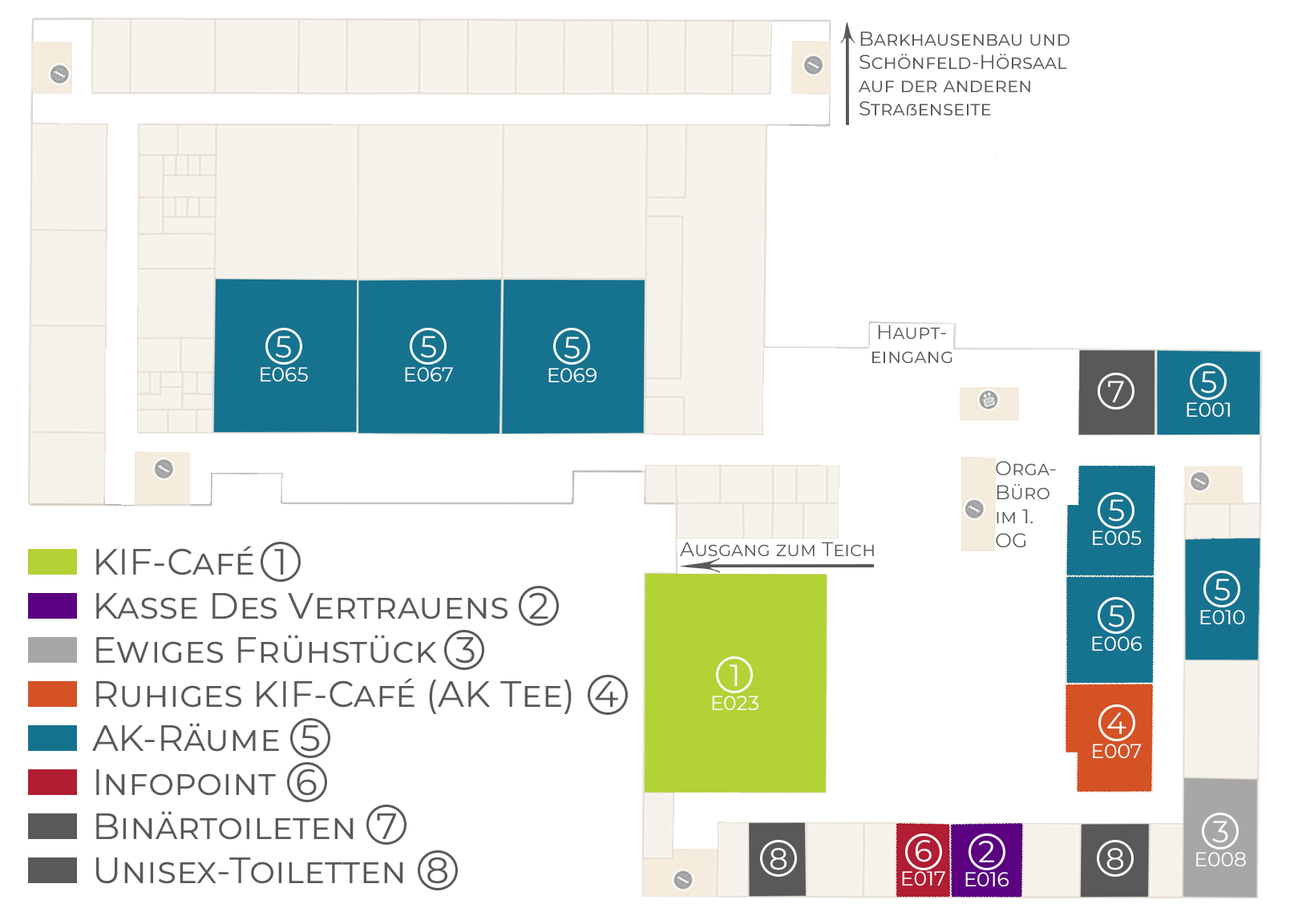
<style>
.page{position:relative;width:1290px;height:924px;background:#ffffff}
.page>*{position:absolute;margin:0}
.t1{font:20px/23.4px "Montserrat-Regular";color:#595959;font-variant:small-caps}
.t2{font:20px "Montserrat-Regular";color:#595959;font-variant:small-caps}
.t3{font:20px "Montserrat-Regular";color:#ffffff;font-variant:small-caps}
.t4{font:30.1px "Montserrat-Regular";color:#ffffff;font-variant:small-caps}
.t5{font:36.7px "Montserrat-Regular";color:#595959;font-variant:small-caps}
.t6{font:40.1px "Montserrat-Regular";color:#595959;font-variant:small-caps}
.t7{font:30.1px "Montserrat-Regular";color:#ffffff}
</style>
<div class="page">
<p class="t1" style="left:859px;top:31px;width:210px;height:85px">Barkhausenbau und <br>Schönfeld-Hörsaal auf der anderen Straßenseite</p>
<p class="t2" style="left:872px;top:325px;width:80px;height:39px;text-align:center">Haupt-<br>eingang</p>
<p class="t3" style="left:261px;top:336px;width:47px;height:46px;text-align:center"><span class="t4">5<br></span>E065</p>
<p class="t3" style="left:405px;top:336px;width:48px;height:46px;text-align:center"><span class="t4">5<br></span>E067</p>
<p class="t3" style="left:548px;top:337px;width:48px;height:46px;text-align:center"><span class="t4">5<br></span>E069</p>
<p class="t3" style="left:1187px;top:371px;width:43px;height:47px;text-align:center"><span class="t4">5<br></span>E001</p>
<p class="t4" style="left:1108px;top:381px;width:16px;height:21px">7</p>
<p class="t2" style="left:996px;top:461px;width:60px;height:87px">Orga-Büro im 1. OG</p>
<p class="t3" style="left:1093px;top:499px;width:49px;height:47px;text-align:center"><span class="t4">5<br></span>E005</p>
<p class="t5" style="left:92px;top:546px;width:526px;height:338px"><span class="t6">  </span>KIF-Café  1<br>  Kasse Des Vertrauens  2<br>  Ewiges Frühstück  3<br>  Ruhiges KIF-Café (AK Tee)  4<br>  AK-Räume  5<br>  Infopoint  6<br>  Binärtoileten  7<br>  Unisex-Toiletten  8</p>
<p class="t2" style="left:680px;top:542px;width:194px;height:15px">Ausgang zum Teich</p>
<p class="t3" style="left:1200px;top:579px;width:45px;height:46px;text-align:center"><span class="t4">5<br></span>E010</p>
<p class="t3" style="left:1092px;top:605px;width:50px;height:47px;text-align:center"><span class="t4">5<br></span>E006</p>
<p class="t3" style="left:712px;top:665px;width:46px;height:46px;text-align:center"><span class="t4">1<br></span>E023</p>
<p class="t3" style="left:1093px;top:713px;width:49px;height:46px;text-align:center"><span class="t4">4<br></span>E007</p>
<p class="t3" style="left:1196px;top:821px;width:50px;height:46px;text-align:center"><span class="t4">3<br></span>E008</p>
<p class="t3" style="left:902px;top:840px;width:43px;height:47px;text-align:center"><span class="t4">6<br></span>E017</p>
<p class="t3" style="left:965px;top:841px;width:44px;height:47px;text-align:center"><span class="t7">2<br></span>E016</p>
<p class="t4" style="left:770px;top:848px;width:17px;height:23px">8</p>
<p class="t4" style="left:1106px;top:848px;width:18px;height:23px">8</p>
</div>
